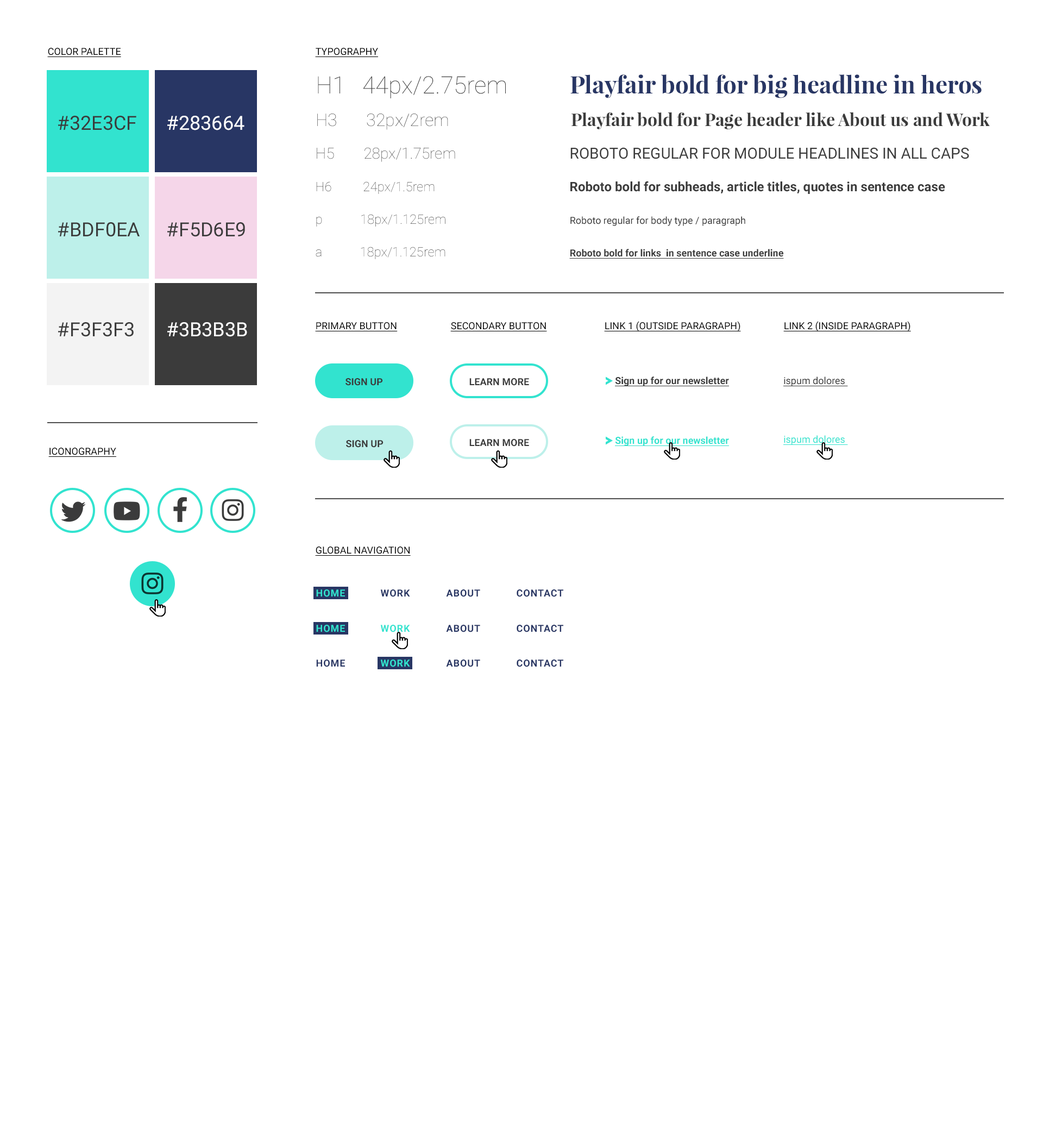
<style>
.page{position:relative;width:1043px;height:1143px;background:#ffffff}
.page>*{position:absolute;margin:0}
.t1{font:9.8px "Roboto-Regular";color:#000000;text-decoration:underline}
.t2{font:13px/16.3px "Roboto-Bold";color:#3b3b3b}
.t3{font:23.9px/16.3px "Roboto-Thin";color:#3b3b3b}
.t4{font:23.9px/16.3px "PlayfairDisplay-Bold";color:#283664}
.t5{font:17.4px/16.3px "Roboto-Thin";color:#3b3b3b}
.t6{font:17.4px/16.3px "PlayfairDisplay-Bold";color:#3b3b3b}
.t7{font:15.2px/16.3px "Roboto-Thin";color:#3b3b3b}
.t8{font:15.2px/16.3px "Roboto-Regular";color:#3b3b3b}
.t9{font:13px/16.3px "Roboto-Thin";color:#3b3b3b}
.t10{font:9.8px/16.3px "Roboto-Regular";color:#3b3b3b}
.t11{font:9.8px/16.3px "Roboto-Bold";color:#3b3b3b;text-decoration:underline}
.t12{font:19.6px "Roboto-Regular";color:#3b3b3b;text-transform:uppercase}
.t13{font:19.6px "Roboto-Regular";color:#3b3b3b}
.t14{font:19.6px "Roboto-Regular";color:#ffffff;text-transform:uppercase}
.t15{font:19.6px "Roboto-Regular";color:#ffffff}
.t16{font:9.8px "Roboto-Bold";color:#3b3b3b;text-decoration:underline}
.t17{font:9.8px "Roboto-Regular";color:#3b3b3b;text-decoration:underline}
.t18{font:9.8px "Roboto-Bold";color:#3b3b3b}
.t19{font:9.8px "Roboto-Bold";color:#32e3cf;text-decoration:underline}
.t20{font:9.8px "Roboto-Regular";color:#32e3cf;text-decoration:underline}
.t21{font:9.8px "Roboto-Bold";letter-spacing:0.05em;color:#32e3cf}
.t22{font:9.8px "Roboto-Bold";letter-spacing:0.05em;color:#283664}
</style>
<div class="page">
<p class="t1" style="left:47px;top:48px;width:74px;height:9px">COLOR PALETTE</p>
<p class="t1" style="left:315px;top:48px;width:63px;height:9px">TYPOGRAPHY</p>
<p class="t2" style="left:316px;top:74px;width:674px;height:185px"><span class="t3">H1   44px/2.75rem     </span><span class="t4">Playfair bold for big headline in heros<br>  <br></span><span class="t5">H3       32px/2rem     </span><span class="t6">          Playfair bold for Page header like About us and Work<br> <br></span><span class="t7">H5        28px/1.75rem      </span><span class="t8">ROBOTO REGULAR FOR MODULE HEADLINES IN ALL CAPS <br><br></span><span class="t9">H6          24px/1.5rem        </span>Roboto bold for subheads, article titles, quotes in sentence case<br><br><span class="t9">p            18px/1.125rem        </span><span class="t10">Roboto regular for body type / paragraph<br><br></span><span class="t9">a            18px/1.125rem        </span><span class="t11">Roboto bold for links  in sentence case underline</span></p>
<p class="t12" style="left:58px;top:116px;width:78px;height:14px"><span class="t13">#</span>32e3cf</p>
<p class="t14" style="left:167px;top:116px;width:77px;height:14px"><span class="t15">#</span>283664</p>
<p class="t12" style="left:58px;top:222px;width:82px;height:15px"><span class="t13">#</span>bdf0ea</p>
<p class="t12" style="left:167px;top:222px;width:78px;height:15px"><span class="t13">#</span>f5d6e9</p>
<p class="t12" style="left:58px;top:322px;width:76px;height:15px"><span class="t13">#</span>f3f3f3</p>
<p class="t14" style="left:167px;top:322px;width:80px;height:15px"><span class="t15">#</span>3b3b3b</p>
<p class="t1" style="left:315px;top:322px;width:83px;height:9px">PRIMARY BUTTON</p>
<p class="t1" style="left:450px;top:322px;width:97px;height:9px">SECONDARY BUTTON</p>
<p class="t1" style="left:604px;top:321px;width:137px;height:11px">LINK 1 (OUTSIDE PARAGRAPH)</p>
<p class="t1" style="left:783px;top:321px;width:128px;height:11px">LINK 2 (INSIDE PARAGRAPH)</p>
<p class="t16" style="left:615px;top:377px;width:114px;height:9px">Sign up for our newsletter</p>
<p class="t17" style="left:783px;top:377px;width:65px;height:9px">ispum dolores</p>
<p class="t18" style="left:346px;top:378px;width:37px;height:8px">SIGN UP</p>
<p class="t18" style="left:469px;top:378px;width:60px;height:8px">LEARN MORE</p>
<p class="t19" style="left:615px;top:436px;width:114px;height:10px">Sign up for our newsletter</p>
<p class="t20" style="left:783px;top:435px;width:65px;height:10px">ispum dolores</p>
<p class="t1" style="left:48px;top:448px;width:68px;height:9px">ICONOGRAPHY</p>
<p class="t18" style="left:346px;top:440px;width:38px;height:8px">SIGN UP</p>
<p class="t18" style="left:469px;top:439px;width:60px;height:8px">LEARN MORE</p>
<p class="t1" style="left:315px;top:547px;width:96px;height:9px">GLOBAL NAVIGATION</p>
<p class="t21" style="left:316px;top:589px;width:29px;height:8px">HOME</p>
<p class="t22" style="left:380px;top:589px;width:30px;height:8px">WORK</p>
<p class="t22" style="left:446px;top:589px;width:34px;height:8px">ABOUT</p>
<p class="t22" style="left:517px;top:589px;width:46px;height:8px">CONTACT</p>
<p class="t21" style="left:316px;top:625px;width:29px;height:7px">HOME</p>
<p class="t21" style="left:380px;top:625px;width:30px;height:7px">WORK</p>
<p class="t22" style="left:446px;top:625px;width:34px;height:7px">ABOUT</p>
<p class="t22" style="left:517px;top:625px;width:46px;height:7px">CONTACT</p>
<p class="t22" style="left:316px;top:660px;width:29px;height:7px">HOME</p>
<p class="t21" style="left:380px;top:660px;width:30px;height:7px">WORK</p>
<p class="t22" style="left:446px;top:660px;width:34px;height:7px">ABOUT</p>
<p class="t22" style="left:517px;top:660px;width:46px;height:7px">CONTACT</p>
</div>
